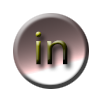
<style>
.page{position:relative;width:100px;height:100px;background:#ffffff}
.page>*{position:absolute;margin:0}
.t1{font:48px "MyriadPro-Regular"}
</style>
<div class="page">
<p class="t1" style="left:35px;top:31px;width:33px;height:34px">in</p>
</div>
